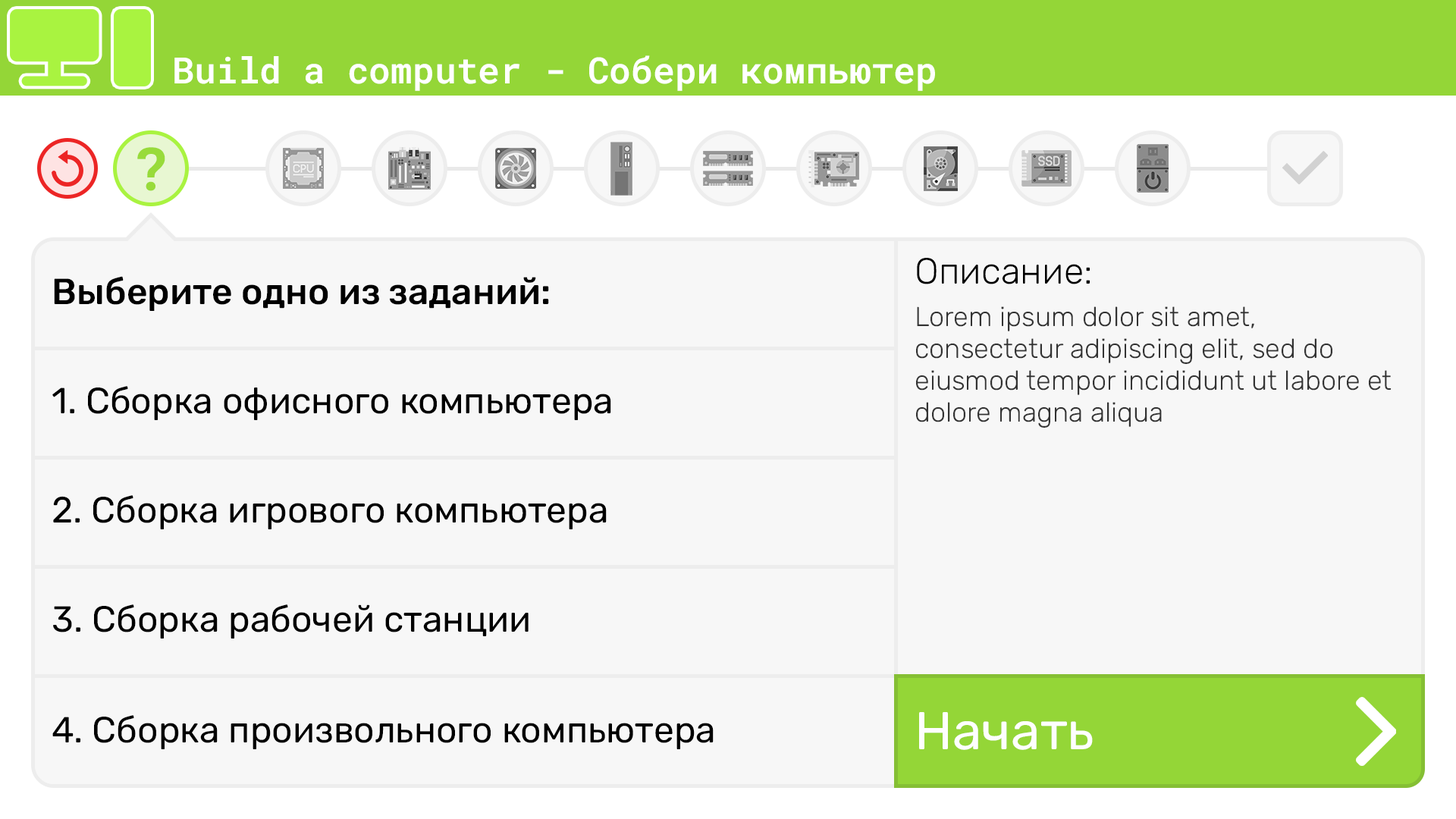
<style>
.page{position:relative;width:1456px;height:819px;background:#f7f7f7}
.page>*{position:absolute;margin:0}
.t1{font:36.4px "RobotoMono-SemiBold";color:#ffffff}
.t2{font:59.7px "RobotoMono-Bold";color:#98db3a}
.t3{font:36.4px "Rubik-Light";color:#000000}
.t4{font:36.4px "Rubik-Medium";color:#000000}
.t5{font:27.3px/31.8px "Rubik-Light";color:#333333}
.t6{font:36.4px "Rubik-Regular";color:#000000}
.t7{font:53.1px "Rubik-Regular";color:#fefefe}
</style>
<div class="page">
<p class="t1" style="left:174px;top:55px;width:761px;height:36px">Build a computer - Собери компьютер</p>
<p class="t2" style="left:137px;top:147px;width:28px;height:44px">?</p>
<p class="t3" style="left:917px;top:258px;width:173px;height:26px">Описание:</p>
<p class="t4" style="left:54px;top:276px;width:495px;height:35px">Выберите одно из заданий:</p>
<p class="t5" style="left:916px;top:306px;width:476px;height:122px">Lorem ipsum dolor sit amet, consectetur adipiscing elit, sed do eiusmod tempor incididunt ut labore et dolore magna aliqua</p>
<p class="t6" style="left:52px;top:386px;width:559px;height:34px">1. Сборка офисного компьютера</p>
<p class="t6" style="left:53px;top:495px;width:554px;height:34px">2. Сборка игрового компьютера</p>
<p class="t6" style="left:53px;top:604px;width:476px;height:35px">3. Сборка рабочей станции</p>
<p class="t7" style="left:919px;top:712px;width:174px;height:38px">Начать</p>
<p class="t6" style="left:52px;top:715px;width:662px;height:34px">4. Сборка произвольного компьютера</p>
</div>
